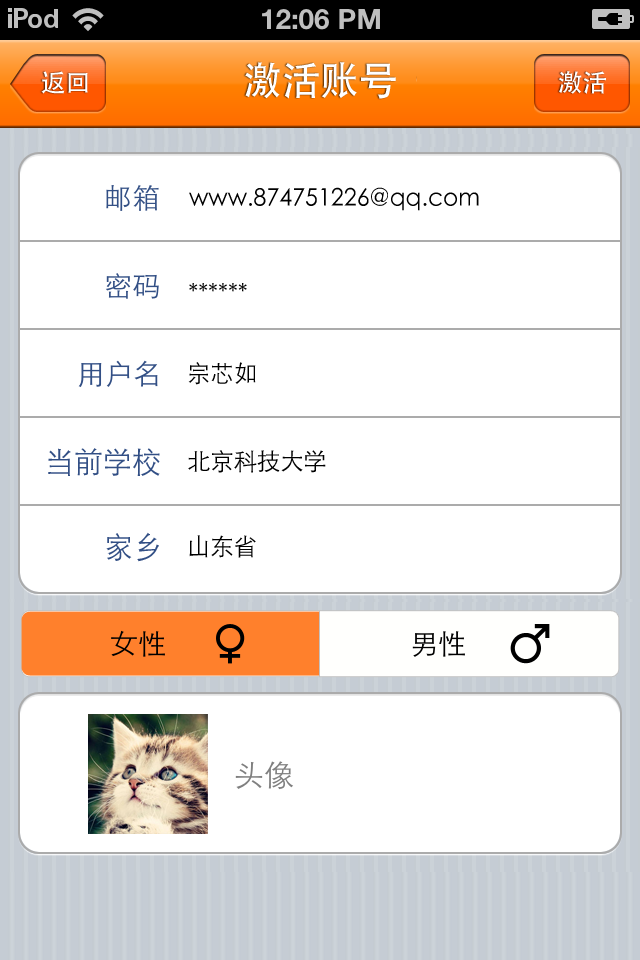
<style>
.page{position:relative;width:640px;height:960px;background:#ffffff}
.page>*{position:absolute;margin:0}
.t1{font:40px "STHeitiSC-Medium";color:#ffffff;scale:0.97 1}
.t2{font:25px "STHeitiSC-Medium";color:#ffffff}
.t3{font:24px "STHeitiSC-Light";color:#000000;scale:0.97 1}
.t4{font:30px "STHeitiSC-Light";color:#324f85;scale:0.97 1}
</style>
<div class="page">
<p class="t1" style="left:245px;top:62px;width:151px;height:37px">激活账号</p>
<p class="t2" style="left:41px;top:71px;width:47px;height:23px">返回</p>
<p class="t2" style="left:559px;top:71px;width:47px;height:23px">激活</p>
<p class="t3" style="left:189px;top:187px;width:290px;height:24px">www.874751226@qq.com</p>
<p class="t3" style="left:189px;top:283px;width:58px;height:9px">******</p>
<p class="t3" style="left:188px;top:362px;width:68px;height:23px">宗芯如</p>
<p class="t4" style="left:48px;top:448px;width:112px;height:28px">当前学校</p>
<p class="t3" style="left:188px;top:450px;width:138px;height:23px">北京科技大学</p>
<p class="t4" style="left:106px;top:532px;width:53px;height:30px">家乡</p>
<p class="t3" style="left:189px;top:535px;width:67px;height:23px">山东省</p>
</div>
